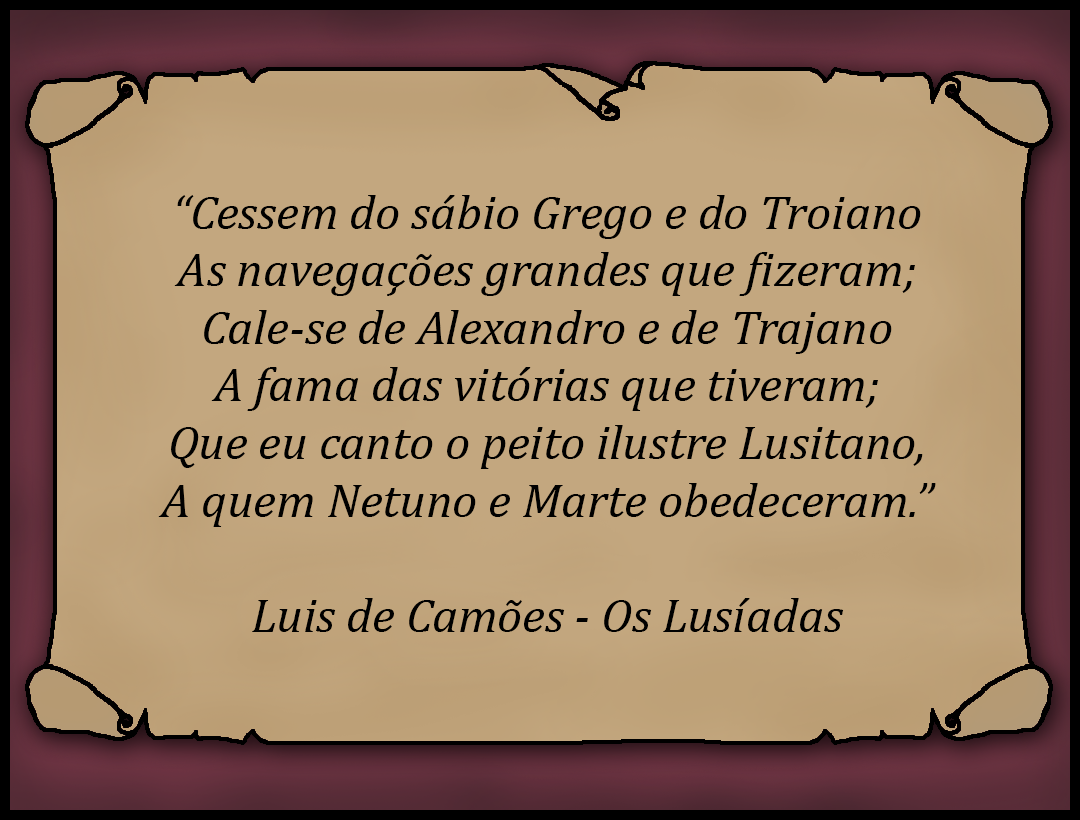
<style>
.page{position:relative;width:1080px;height:820px;background:#c3a77f}
.page>*{position:absolute;margin:0}
.t1{font:48px "Cambria-Italic";color:#000000;scale:1.03 1}
</style>
<div class="page">
<p class="t1" style="left:158px;top:195px;width:778px;height:437px;text-align:center">“Cessem do sábio Grego e do Troiano<br>As navegações grandes que fizeram;<br>Cale-se de Alexandro e de Trajano<br>A fama das vitórias que tiveram;<br>Que eu canto o peito ilustre Lusitano,<br>A quem Netuno e Marte obedeceram.”<br><br>Luis de Camões - Os Lusíadas</p>
</div>
